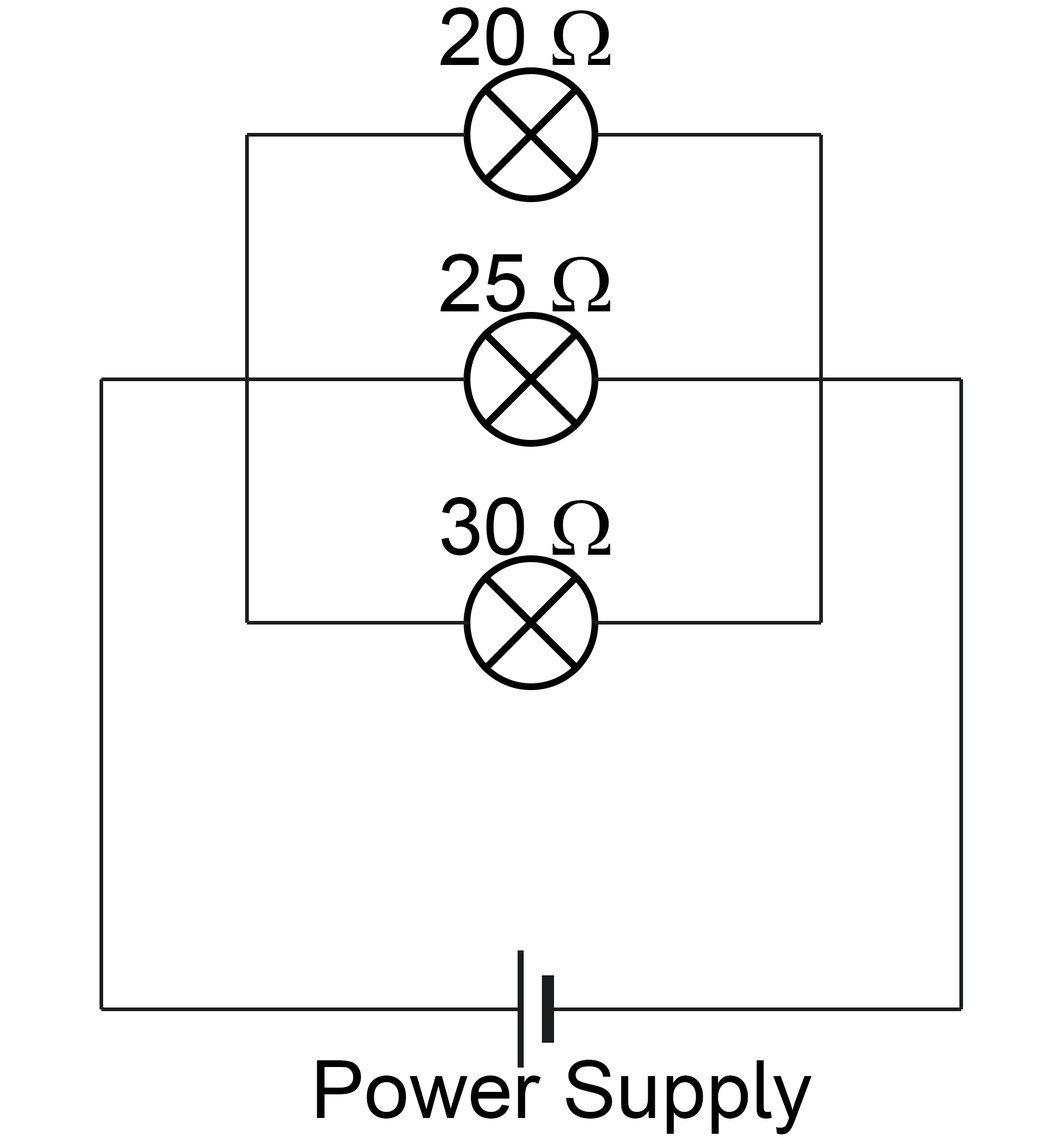
<style>
.page{position:relative;width:1048px;height:1138px;background:#ffffff}
.page>*{position:absolute;margin:0}
.t1{font:80.9px "ArialMT";color:#000000}
.t2{font:80.9px "SymbolMT";color:#000000}
</style>
<div class="page">
<p class="t1" style="left:441px;top:7px;width:169px;height:59px">20 <span class="t2">W</span></p>
<p class="t1" style="left:441px;top:254px;width:169px;height:58px">25 <span class="t2">W</span></p>
<p class="t1" style="left:441px;top:497px;width:169px;height:58px">30 <span class="t2">W</span></p>
<p class="t1" style="left:317px;top:1060px;width:495px;height:74px">Power Supply</p>
</div>
